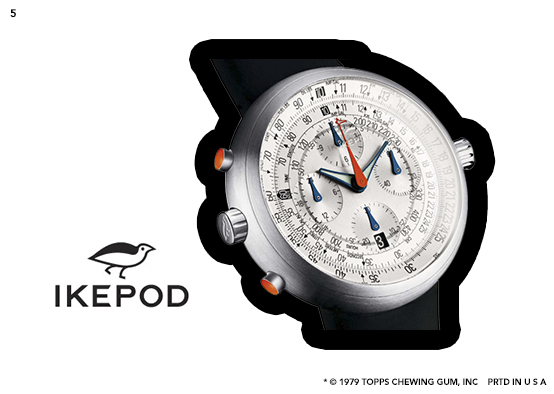
<style>
.page{position:relative;width:554px;height:394px;background:#ffffff}
.page>*{position:absolute;margin:0}
.t1{font:11.1px "Avenir-Black";letter-spacing:-0.025em;color:#000000}
.t2{font:8.9px "Avenir-Black";letter-spacing:-0.025em;color:#000000}
</style>
<div class="page">
<p class="t1" style="left:10px;top:9px;width:6px;height:9px">5</p>
<p class="t2" style="left:323px;top:378px;width:224px;height:8px">* © 1979 TOPPS CHEWING GUM, INC    PRTD IN U S A</p>
</div>
